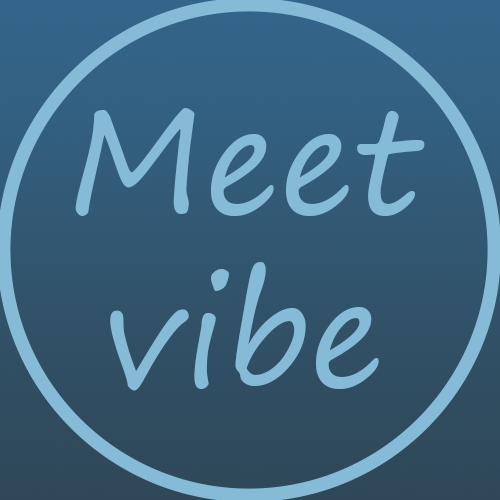
<style>
.page{position:relative;width:500px;height:500px}
.page>*{position:absolute;margin:0}
.t1{font:144.1px "SegoePrint";color:#86bbd8}
</style>
<div class="page">
<p class="t1" style="left:75px;top:108px;width:350px;height:283px;text-align:center">Meet<br>vibe</p>
</div>
